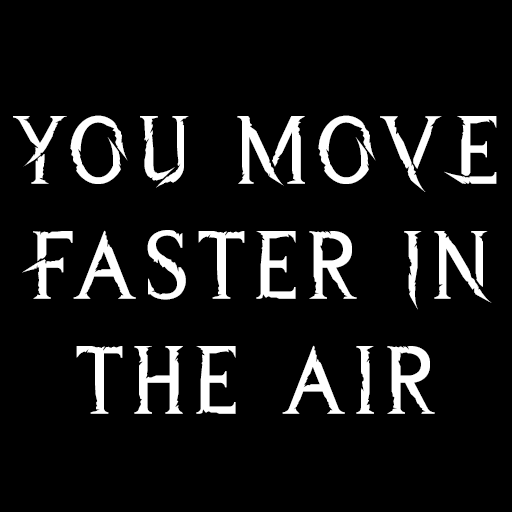
<style>
.page{position:relative;width:512px;height:512px;background:#000000}
.page>*{position:absolute;margin:0}
.t1{font:95.9px "WreckedShipRegular";letter-spacing:0.05em;color:#ffffff}
</style>
<div class="page">
<p class="t1" style="left:13px;top:115px;width:484px;height:299px;text-align:center">YOU MOVE Faster IN the air</p>
</div>
